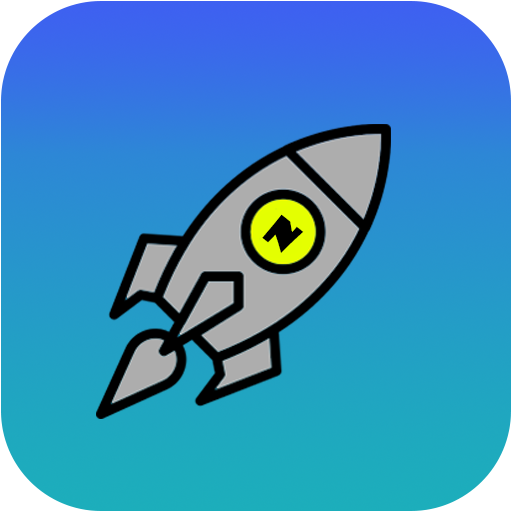
<style>
.page{position:relative;width:512px;height:512px}
.page>*{position:absolute;margin:0}
.t1{font:40.4px "ShowcardGothic-Reg";color:#000000;scale:1.14 1}
</style>
<div class="page">
<p class="t1" style="left:262px;top:214px;width:42px;height:39px;rotate:38deg">N</p>
</div>
